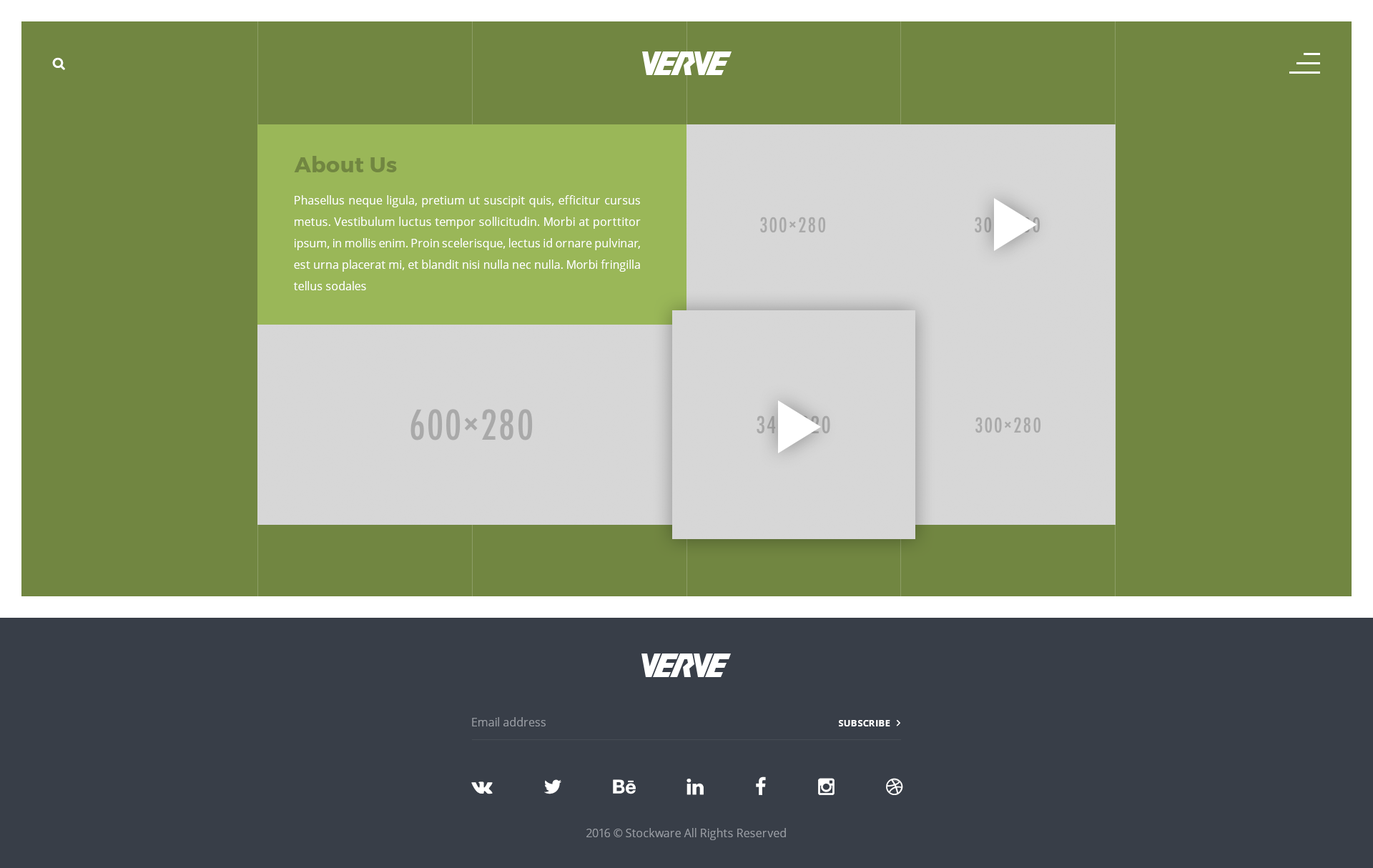
<style>
.page{position:relative;width:1373px;height:868px;background:#718641}
.page>*{position:absolute;margin:0}
.t1{font:21.5px "Montserrat-Bold";letter-spacing:0.02em;color:#718641}
.t2{font:11.4px/21.5px "OpenSans";color:#ffffff}
.t3{font:11.4px "OpenSans";color:#969aa1}
.t4{font:9.3px "OpenSans-Bold";letter-spacing:0.02em;color:#ffffff;text-transform:uppercase}
</style>
<div class="page">
<p class="t1" style="left:294px;top:156px;width:103px;height:16px">About Us</p>
<p class="t2" style="left:293px;top:195px;width:348px;height:95px;text-align:justify">Phasellus neque ligula, pretium ut suscipit quis, efficitur cursus metus. Vestibulum luctus tempor sollicitudin. Morbi at porttitor ipsum, in mollis enim. Proin scelerisque, lectus id ornare pulvinar, est urna placerat mi, et blandit nisi nulla nec nulla. Morbi fringilla tellus sodales</p>
<p class="t3" style="left:472px;top:717px;width:74px;height:10px">Email address</p>
<p class="t4" style="left:839px;top:720px;width:51px;height:7px">subscribe</p>
<p class="t3" style="left:587px;top:828px;width:199px;height:12px">2016 © Stockware All Rights Reserved</p>
</div>
